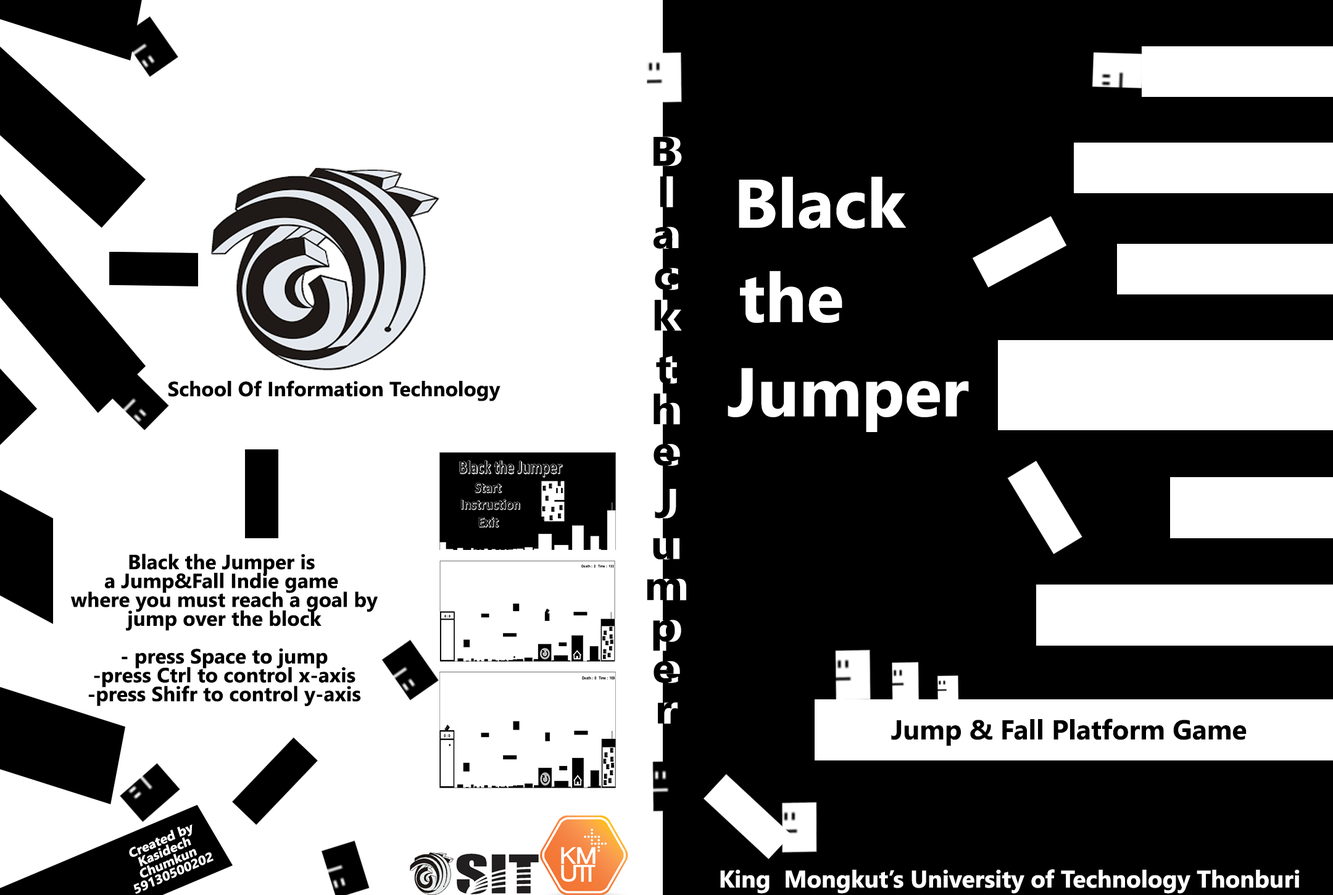
<style>
.page{position:relative;width:1333px;height:895px;background:#ffffff}
.page>*{position:absolute;margin:0}
.t1{font:41.1px/18.9px "SegoeUI-Bold";color:#000000}
.t2{font:41.1px/18.9px "SegoeUI-Bold";color:#ffffff}
.t3{font:68.5px/18.8px "SegoeUI-Bold";color:#ffffff}
.t4{font:20.6px "SegoeUI-Bold";color:#000000}
.t5{font:7.4px/18.9px "SegoeUI-Bold";color:#000000}
.t6{font:27.4px "SegoeUI-Bold";color:#000000}
.t7{font:4.6px/11.7px "SegoeUI-Bold";color:#ffffff;scale:1.07 1}
.t8{font:24px "SegoeUI-Bold";color:#ffffff}
</style>
<div class="page">
<p class="t1" style="left:647px;top:136px;width:33px;height:588px;text-align:center">Black the Jumper</p>
<p class="t2" style="left:653px;top:136px;width:33px;height:588px;text-align:center">Black the Jumper</p>
<p class="t3" style="left:727px;top:176px;width:242px;height:256px;text-align:center">Black<br><br><br><br><br>the<br><br><br><br><br>      Jumper</p>
<p class="t4" style="left:168px;top:380px;width:332px;height:21px">School Of Information Technology</p>
<p class="t5" style="left:70px;top:553px;width:308px;height:153px;text-align:center">Black the Jumper is <br>a Jump&amp;Fall Indie game <br>where you must reach a goal by<br>jump over the block<br><br>- press Space to jump<br>-press Ctrl to control x-axis<br>-press Shifr to control y-axis</p>
<p class="t6" style="left:891px;top:718px;width:355px;height:28px">Jump &amp; Fall Platform Game</p>
<p class="t7" style="left:129px;top:824px;width:84px;height:69px;text-align:center;rotate:-23deg">Created by <br>Kasidech <br>Chumkun <br>59130500202</p>
<p class="t8" style="left:720px;top:869px;width:579px;height:24px">King  Mongkut’s University of Technology Thonburi</p>
</div>
